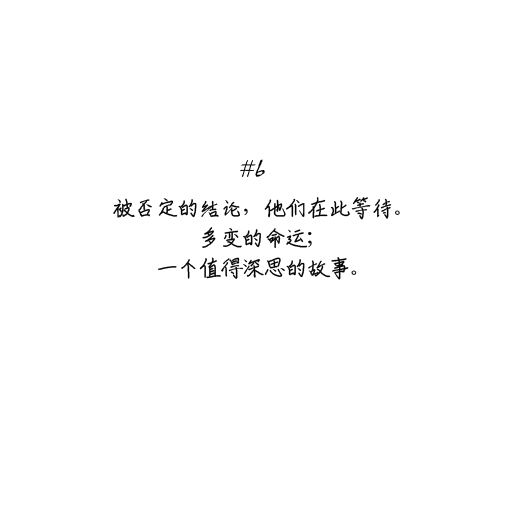
<style>
.page{position:relative;width:512px;height:512px;background:#ffffff}
.page>*{position:absolute;margin:0}
.t1{font:24px/30px "ShouShuti";letter-spacing:-0.1em;color:#000000}
</style>
<div class="page">
<p class="t1" style="left:113px;top:197px;width:287px;height:83px;text-align:center">被否定的结论，他们在此等待。<br>多变的命运；<br>一个值得深思的故事。</p>
</div>
